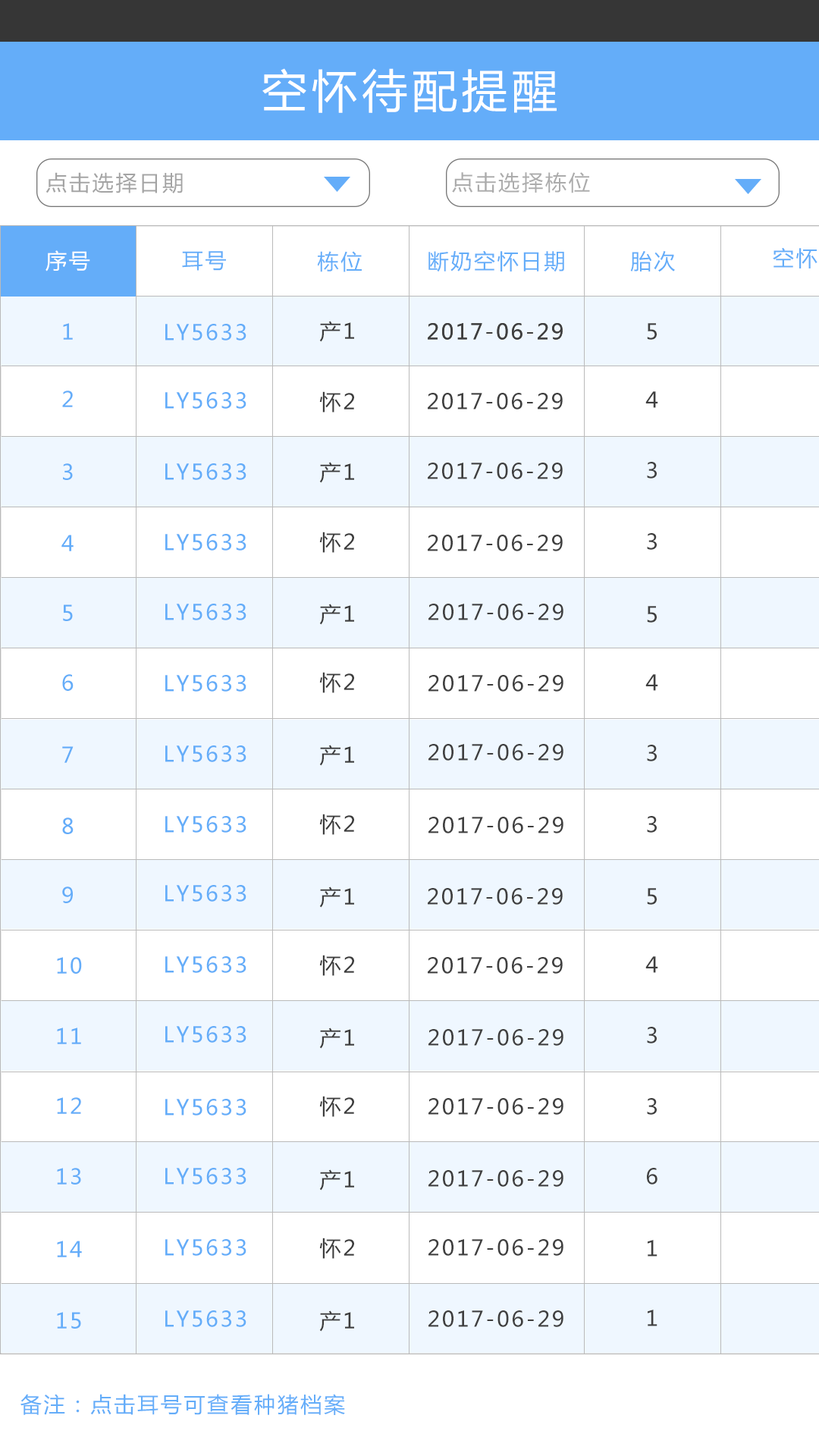
<style>
.page{position:relative;width:819px;height:1456px;background:#ffffff}
.page>*{position:absolute;margin:0}
.t1{font:45.5px "MicrosoftYaHei";letter-spacing:0.1em;color:#ffffff}
.t2{font:21.2px "MicrosoftYaHei";letter-spacing:0.1em;color:#a4a4a4}
.t3{font:21.2px "MicrosoftYaHei";letter-spacing:0.1em;color:#acacac}
.t4{font:21.2px "MicrosoftYaHei";letter-spacing:0.1em;color:#ffffff}
.t5{font:21.2px "MicrosoftYaHei";letter-spacing:0.1em;color:#64adf9}
.t6{font:21.2px "MicrosoftYaHei";letter-spacing:0.1em;color:#3c3c3c}
.t7{font:21.2px "MicrosoftYaHei";letter-spacing:0.1em;color:#3f3f3f}
</style>
<div class="page">
<p class="t1" style="left:262px;top:68px;width:295px;height:45px">空怀待配提醒</p>
<p class="t2" style="left:45px;top:172px;width:138px;height:21px">点击选择日期</p>
<p class="t3" style="left:452px;top:172px;width:138px;height:21px">点击选择栋位</p>
<p class="t4" style="left:45px;top:250px;width:45px;height:21px">序号</p>
<p class="t5" style="left:182px;top:251px;width:44px;height:20px">耳号</p>
<p class="t5" style="left:317px;top:251px;width:45px;height:21px">栋位</p>
<p class="t5" style="left:428px;top:250px;width:136px;height:22px">断奶空怀日期</p>
<p class="t5" style="left:630px;top:251px;width:45px;height:21px">胎次</p>
<p class="t5" style="left:773px;top:247px;width:44px;height:21px">空怀</p>
<p class="t5" style="left:63px;top:323px;width:10px;height:17px">1</p>
<p class="t5" style="left:165px;top:324px;width:81px;height:16px">LY5633</p>
<p class="t6" style="left:319px;top:321px;width:35px;height:21px">产1</p>
<p class="t7" style="left:428px;top:323px;width:135px;height:17px">2017-06-29</p>
<p class="t7" style="left:428px;top:323px;width:135px;height:17px">2017-06-29</p>
<p class="t7" style="left:647px;top:323px;width:10px;height:17px">5</p>
<p class="t5" style="left:62px;top:391px;width:11px;height:16px">2</p>
<p class="t5" style="left:165px;top:392px;width:81px;height:17px">LY5633</p>
<p class="t6" style="left:319px;top:391px;width:35px;height:22px">怀2</p>
<p class="t7" style="left:428px;top:393px;width:135px;height:16px">2017-06-29</p>
<p class="t7" style="left:645px;top:391px;width:13px;height:17px">4</p>
<p class="t6" style="left:319px;top:462px;width:35px;height:21px">产1</p>
<p class="t7" style="left:647px;top:462px;width:10px;height:17px">3</p>
<p class="t5" style="left:63px;top:463px;width:10px;height:17px">3</p>
<p class="t5" style="left:165px;top:463px;width:81px;height:17px">LY5633</p>
<p class="t7" style="left:428px;top:463px;width:135px;height:16px">2017-06-29</p>
<p class="t5" style="left:165px;top:534px;width:81px;height:17px">LY5633</p>
<p class="t6" style="left:319px;top:532px;width:35px;height:21px">怀2</p>
<p class="t7" style="left:647px;top:533px;width:10px;height:17px">3</p>
<p class="t5" style="left:61px;top:535px;width:13px;height:16px">4</p>
<p class="t7" style="left:428px;top:535px;width:135px;height:16px">2017-06-29</p>
<p class="t5" style="left:63px;top:604px;width:10px;height:17px">5</p>
<p class="t5" style="left:165px;top:604px;width:81px;height:16px">LY5633</p>
<p class="t6" style="left:319px;top:604px;width:35px;height:21px">产1</p>
<p class="t7" style="left:428px;top:604px;width:135px;height:16px">2017-06-29</p>
<p class="t7" style="left:647px;top:606px;width:10px;height:17px">5</p>
<p class="t5" style="left:62px;top:674px;width:12px;height:17px">6</p>
<p class="t5" style="left:165px;top:675px;width:81px;height:17px">LY5633</p>
<p class="t6" style="left:319px;top:672px;width:35px;height:21px">怀2</p>
<p class="t7" style="left:428px;top:675px;width:135px;height:17px">2017-06-29</p>
<p class="t7" style="left:645px;top:674px;width:13px;height:17px">4</p>
<p class="t5" style="left:62px;top:746px;width:12px;height:17px">7</p>
<p class="t5" style="left:165px;top:745px;width:81px;height:17px">LY5633</p>
<p class="t6" style="left:319px;top:745px;width:35px;height:21px">产1</p>
<p class="t7" style="left:428px;top:744px;width:135px;height:17px">2017-06-29</p>
<p class="t7" style="left:647px;top:745px;width:10px;height:16px">3</p>
<p class="t5" style="left:62px;top:817px;width:12px;height:17px">8</p>
<p class="t5" style="left:165px;top:816px;width:81px;height:17px">LY5633</p>
<p class="t6" style="left:319px;top:814px;width:35px;height:21px">怀2</p>
<p class="t7" style="left:428px;top:817px;width:135px;height:16px">2017-06-29</p>
<p class="t7" style="left:647px;top:816px;width:10px;height:17px">3</p>
<p class="t5" style="left:62px;top:886px;width:11px;height:17px">9</p>
<p class="t5" style="left:165px;top:885px;width:81px;height:17px">LY5633</p>
<p class="t6" style="left:319px;top:886px;width:35px;height:22px">产1</p>
<p class="t7" style="left:428px;top:888px;width:135px;height:17px">2017-06-29</p>
<p class="t7" style="left:647px;top:888px;width:10px;height:17px">5</p>
<p class="t5" style="left:57px;top:957px;width:25px;height:17px">10</p>
<p class="t5" style="left:165px;top:956px;width:81px;height:17px">LY5633</p>
<p class="t6" style="left:319px;top:955px;width:35px;height:21px">怀2</p>
<p class="t7" style="left:428px;top:957px;width:135px;height:17px">2017-06-29</p>
<p class="t7" style="left:645px;top:956px;width:13px;height:17px">4</p>
<p class="t5" style="left:57px;top:1028px;width:24px;height:16px">11</p>
<p class="t5" style="left:165px;top:1026px;width:81px;height:17px">LY5633</p>
<p class="t6" style="left:319px;top:1028px;width:35px;height:21px">产1</p>
<p class="t7" style="left:428px;top:1029px;width:135px;height:17px">2017-06-29</p>
<p class="t7" style="left:647px;top:1027px;width:10px;height:16px">3</p>
<p class="t5" style="left:57px;top:1097px;width:24px;height:17px">12</p>
<p class="t6" style="left:319px;top:1096px;width:35px;height:21px">怀2</p>
<p class="t5" style="left:165px;top:1099px;width:81px;height:16px">LY5633</p>
<p class="t7" style="left:428px;top:1098px;width:135px;height:17px">2017-06-29</p>
<p class="t7" style="left:647px;top:1098px;width:10px;height:17px">3</p>
<p class="t5" style="left:57px;top:1168px;width:24px;height:17px">13</p>
<p class="t5" style="left:165px;top:1168px;width:81px;height:17px">LY5633</p>
<p class="t6" style="left:319px;top:1169px;width:35px;height:22px">产1</p>
<p class="t7" style="left:647px;top:1168px;width:10px;height:17px">6</p>
<p class="t7" style="left:428px;top:1170px;width:135px;height:17px">2017-06-29</p>
<p class="t5" style="left:57px;top:1241px;width:25px;height:16px">14</p>
<p class="t5" style="left:165px;top:1239px;width:81px;height:17px">LY5633</p>
<p class="t6" style="left:319px;top:1238px;width:35px;height:21px">怀2</p>
<p class="t7" style="left:428px;top:1239px;width:135px;height:17px">2017-06-29</p>
<p class="t7" style="left:648px;top:1240px;width:9px;height:17px">1</p>
<p class="t5" style="left:57px;top:1312px;width:24px;height:17px">15</p>
<p class="t5" style="left:165px;top:1310px;width:81px;height:17px">LY5633</p>
<p class="t6" style="left:319px;top:1310px;width:35px;height:22px">产1</p>
<p class="t7" style="left:428px;top:1310px;width:135px;height:17px">2017-06-29</p>
<p class="t7" style="left:648px;top:1310px;width:9px;height:16px">1</p>
<p class="t5" style="left:20px;top:1394px;width:325px;height:21px">备注：点击耳号可查看种猪档案</p>
</div>
